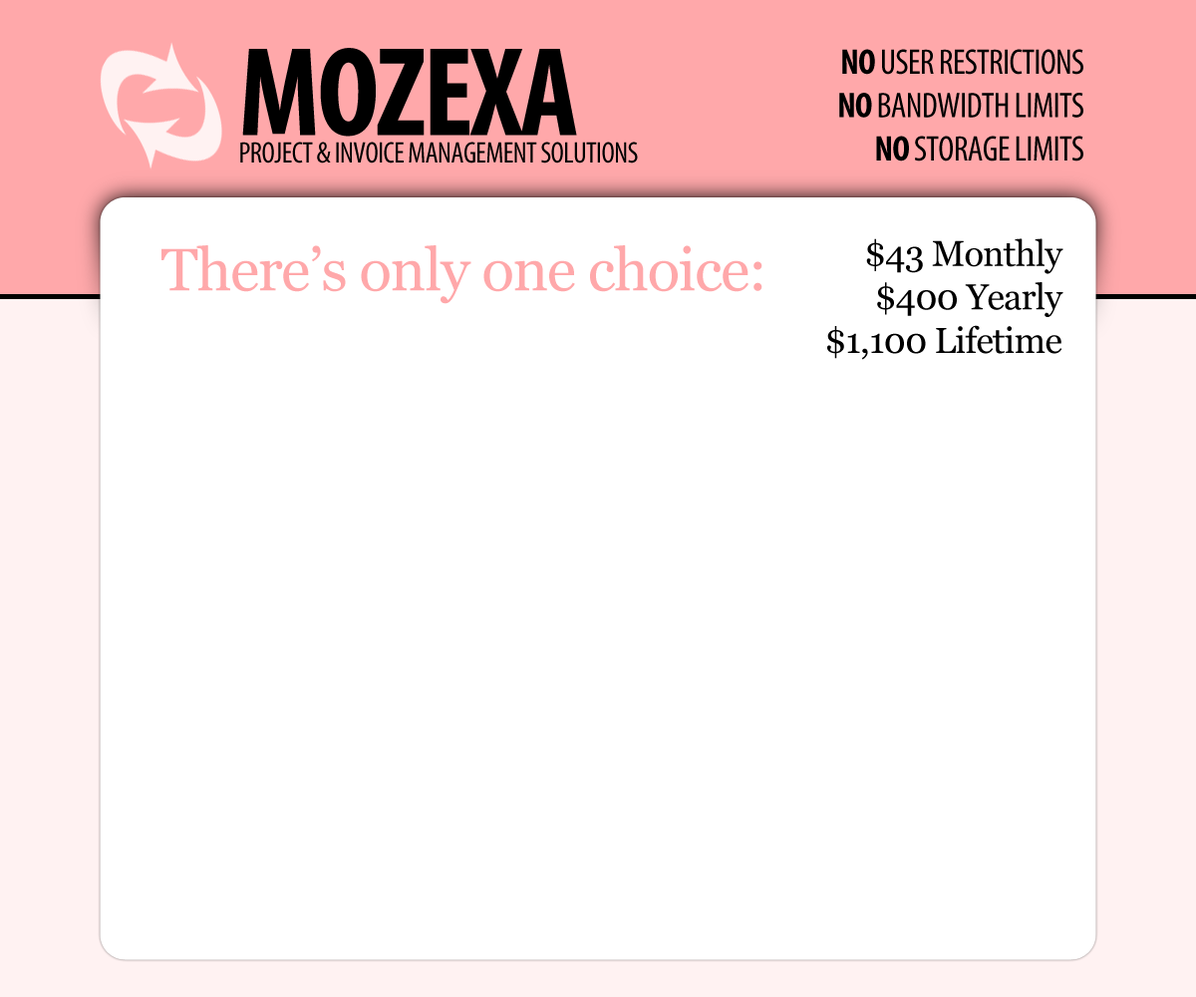
<style>
.page{position:relative;width:1196px;height:997px;background:#ffffff}
.page>*{position:absolute;margin:0}
.t1{font:29.9px/27.4px "MyriadPro-Cond";letter-spacing:-0.02em;color:#000000}
.t2{font:127.6px/27.4px "MyriadPro-BoldCond";letter-spacing:-0.02em;color:#000000}
.t3{font:35.9px/43.4px "MyriadPro-Cond";letter-spacing:-0.02em;color:#000000}
.t4{font:35.9px/43.4px "MyriadPro-BoldCond";letter-spacing:-0.02em;color:#000000}
.t5{font:59.8px "Georgia";letter-spacing:-0.02em;color:#ffa8aa}
.t6{font:35.9px/43.4px "Georgia";letter-spacing:-0.02em;color:#000000}
</style>
<div class="page">
<p class="t1" style="left:240px;top:48px;width:398px;height:115px"><span class="t2">MOZEXA<br></span>PROJECT &amp; INVOICE MANAGEMENT SOLUTIONS</p>
<p class="t3" style="left:839px;top:49px;width:245px;height:112px;text-align:right"><span class="t4">NO </span>USER RESTRICTIONS<br><span class="t4">NO</span> BANDWIDTH LIMITS<br><span class="t4">NO </span>STORAGE LIMITS</p>
<p class="t5" style="left:161px;top:245px;width:602px;height:59px">There’s only one choice:</p>
<p class="t6" style="left:827px;top:238px;width:237px;height:122px;text-align:right">$43 Monthly<br>$400 Yearly<br>$1,100 Lifetime</p>
</div>
